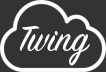
<style>
.page{position:relative;width:106px;height:72px;background:#333333}
.page>*{position:absolute;margin:0}
.t1{font:40.8px "SignPainter-HouseScript";color:#ffffff}
</style>
<div class="page">
<p class="t1" style="left:20px;top:26px;width:70px;height:40px">Twing</p>
</div>
